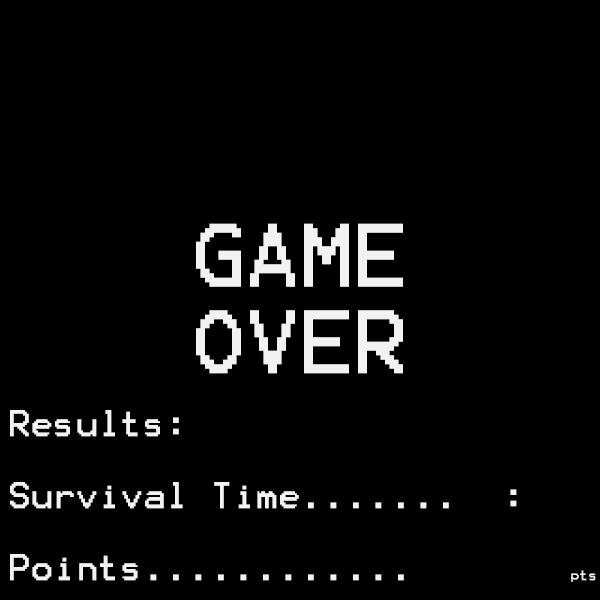
<style>
.page{position:relative;width:600px;height:600px;background:#000000}
.page>*{position:absolute;margin:0}
.t1{font:72px "Terminal";color:#f2f2f2}
.t2{font:29px "Terminal";color:#f2f2f2}
.t3{font:30px "Terminal";color:#f2f2f2}
.t4{font:12px "Terminal";color:#f2f2f2}
</style>
<div class="page">
<p class="t1" style="left:196px;top:223px;width:207px;height:151px;text-align:center"><span class="t2"><br><br><br><br><br><br></span>GAME<br>OVER</p>
<p class="t3" style="left:10px;top:410px;width:586px;height:172px">Results:<br><br>Survival Time.......  :  <br><br>Points............       <span class="t4">pts</span></p>
</div>
